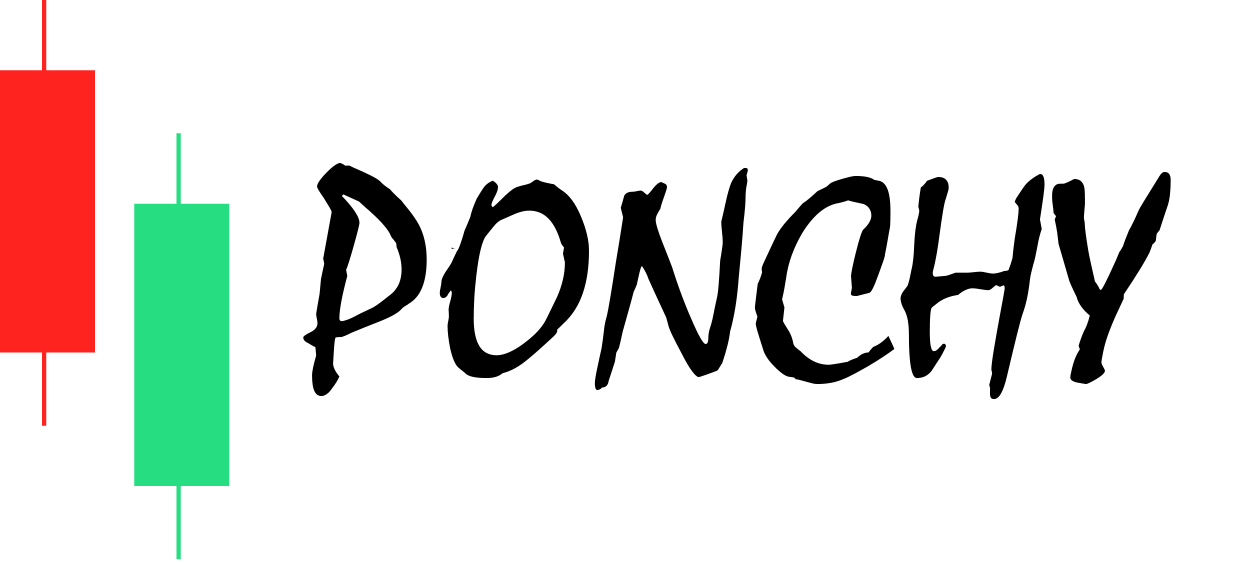
<style>
.page{position:relative;width:1246px;height:563px;background:#ffffff}
.page>*{position:absolute;margin:0}
.t1{font:300px "Mistral";color:#000000}
</style>
<div class="page">
<p class="t1" style="left:303px;top:163px;width:868px;height:236px">PONCHY</p>
</div>
